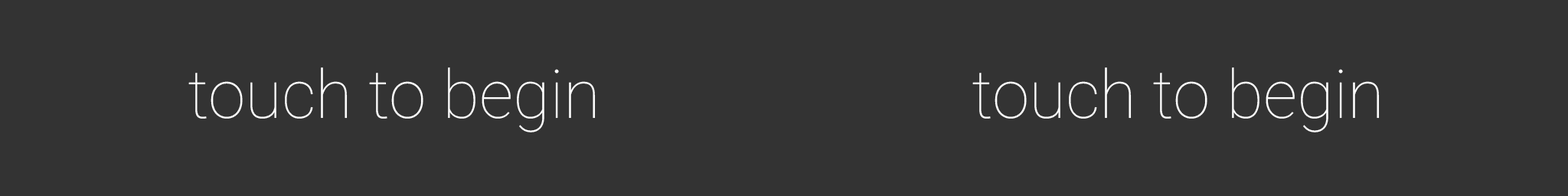
<style>
.page{position:relative;width:1568px;height:196px;background:#333333}
.page>*{position:absolute;margin:0}
.t1{font:67.2px "Roboto-Thin";color:#ffffff}
</style>
<div class="page">
<p class="t1" style="left:188px;top:67px;width:408px;height:65px">touch to begin</p>
<p class="t1" style="left:972px;top:67px;width:408px;height:65px">touch to begin</p>
</div>
